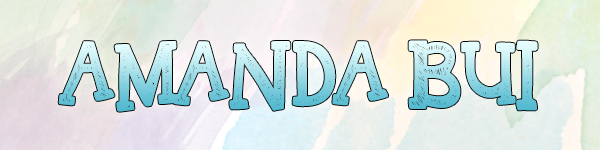
<style>
.page{position:relative;width:600px;height:150px}
.page>*{position:absolute;margin:0}
.t1{font:80px "KBREINDEERGAMES"}
</style>
<div class="page">
<p class="t1" style="left:58px;top:40px;width:480px;height:72px">AMANDA BUI</p>
</div>
